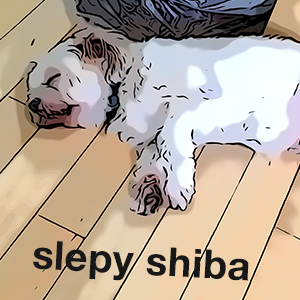
<style>
.page{position:relative;width:300px;height:300px}
.page>*{position:absolute;margin:0}
.t1{font:40px "HelveticaNeue-Bold";letter-spacing:0.016em;color:#181818}
</style>
<div class="page">
<p class="t1" style="left:33px;top:241px;width:216px;height:40px;rotate:3deg">slepy shiba</p>
</div>
